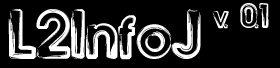
<style>
.page{position:relative;width:280px;height:68px;background:#000000}
.page>*{position:absolute;margin:0}
.t1{font:25px "BennyBlanco";color:#ffffff}
.t2{font:50px "BennyBlanco";color:#ffffff}
</style>
<div class="page">
<p class="t1" style="left:212px;top:3px;width:57px;height:26px">v. 0.1</p>
<p class="t2" style="left:8px;top:9px;width:193px;height:51px">L2InfoJ</p>
</div>
